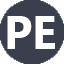
<style>
.page{position:relative;width:64px;height:64px;background:#393f4d}
.page>*{position:absolute;margin:0}
.t1{font:45.8px "SegoeUI-Bold";color:#ffffff}
</style>
<div class="page">
<p class="t1" style="left:7px;top:16px;width:48px;height:33px">PE</p>
</div>
